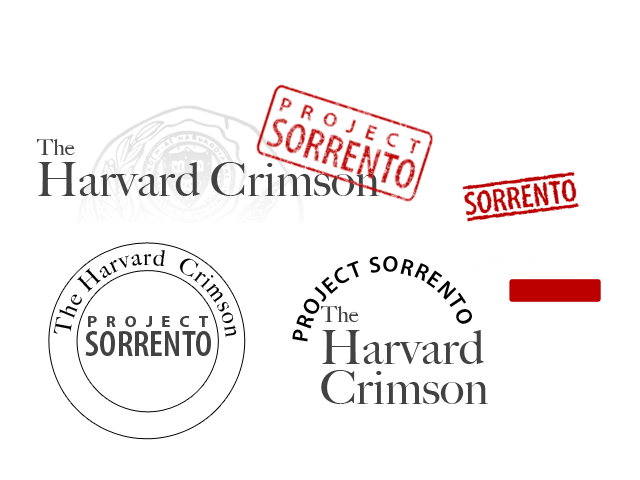
<style>
.page{position:relative;width:640px;height:480px;background:#ffffff}
.page>*{position:absolute;margin:0}
.t1{font:22.1px "BigCaslon-Medium";color:#424242}
.t2{font:47.1px "BigCaslon-Medium";color:#424242}
.t3{font:22.5px "BigCaslon-Medium";letter-spacing:0.05em;color:#000000}
.t4{font:22.5px "MyriadPro-Semibold";letter-spacing:0.05em;color:#000000;text-transform:uppercase}
.t5{font:15.9px "MyriadPro-Bold";letter-spacing:0.5em;color:#424242;text-transform:uppercase;scale:1.1 1}
.t6{font:37px "MyriadPro-SemiboldCond";color:#424242;text-transform:uppercase}
.t7{font:47.1px/40px "BigCaslon-Medium";color:#424242}
</style>
<div class="page">
<p class="t1" style="left:37px;top:139px;width:38px;height:16px">The</p>
<p class="t2" style="left:38px;top:162px;width:341px;height:34px">Harvard Crimson</p>
<p class="t3" style="left:53px;top:250px;width:184px;height:88px;rotate:-52deg">The Harvard  Crimson</p>
<p class="t4" style="left:292px;top:256px;width:180px;height:86px;rotate:-52deg">Project Sorrento</p>
<p class="t5" style="left:88px;top:316px;width:120px;height:11px">Project</p>
<p class="t1" style="left:321px;top:306px;width:38px;height:16px">The</p>
<p class="t6" style="left:85px;top:331px;width:126px;height:25px">Sorrento</p>
<p class="t7" style="left:321px;top:330px;width:167px;height:74px">Harvard<br>Crimson</p>
</div>
